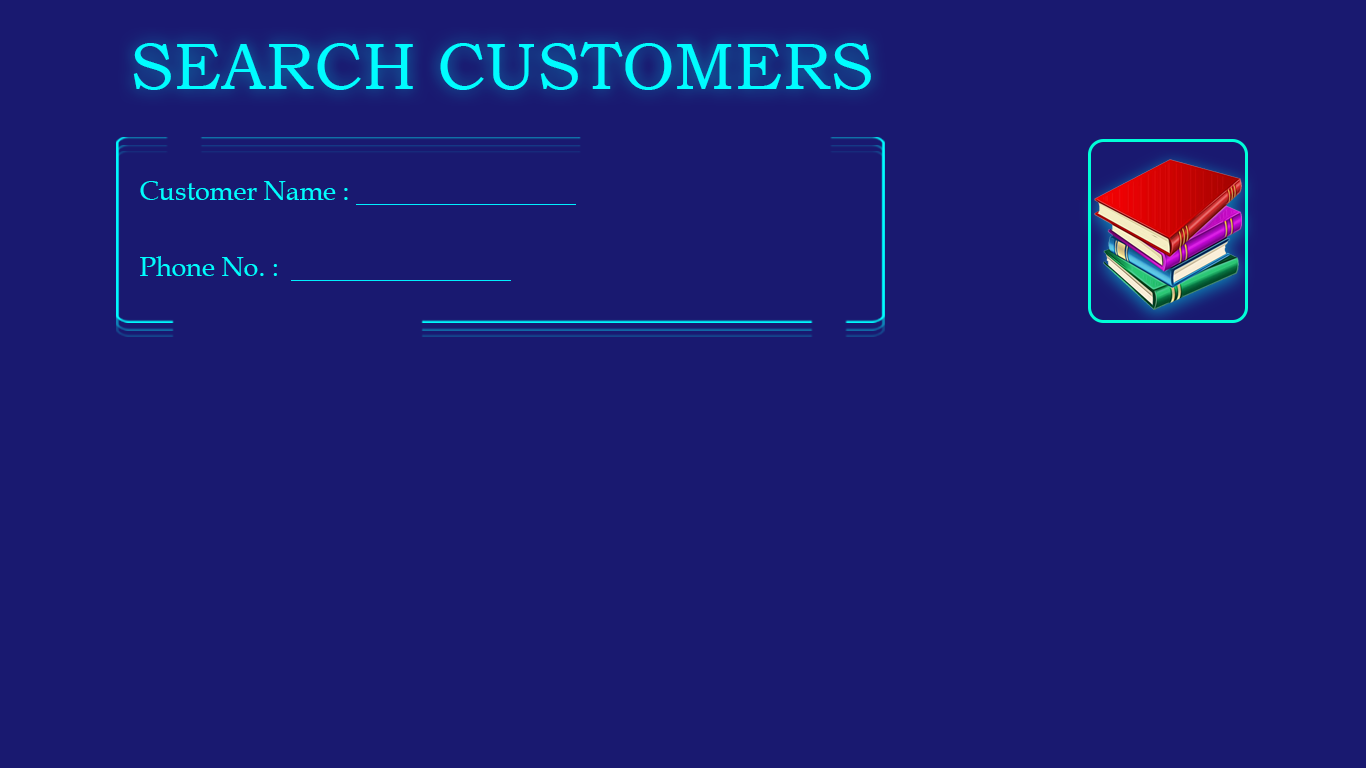
<style>
.page{position:relative;width:1366px;height:768px;background:#191970}
.page>*{position:absolute;margin:0}
.t1{font:66.1px "BookmanOldStyle";color:#00fcff}
.t2{font:26.9px "BookAntiqua";color:#00fcff}
</style>
<div class="page">
<p class="t1" style="left:133px;top:42px;width:738px;height:48px">SEARCH CUSTOMERS</p>
<p class="t2" style="left:140px;top:181px;width:208px;height:19px">Customer Name :</p>
<p class="t2" style="left:140px;top:256px;width:137px;height:20px">Phone No. :</p>
</div>
